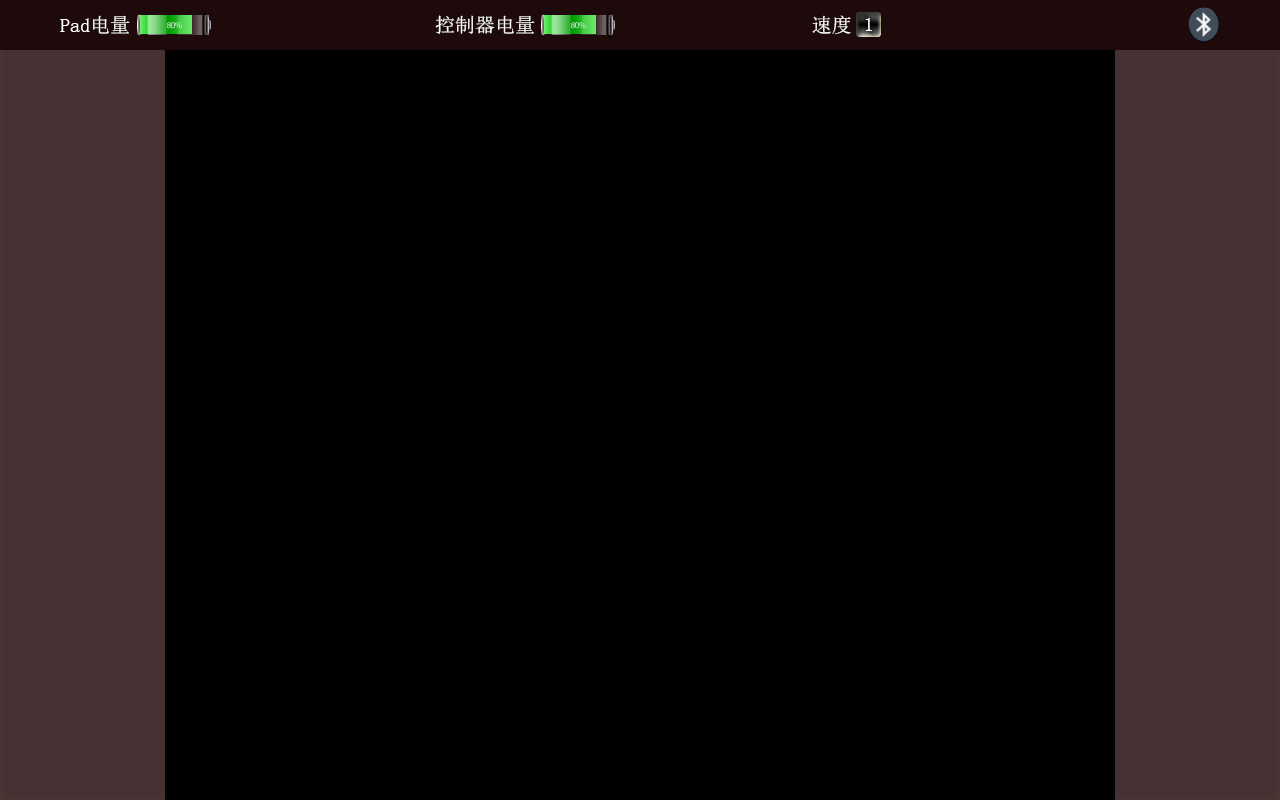
<style>
.page{position:relative;width:1280px;height:800px;background:#000000}
.page>*{position:absolute;margin:0}
.t1{font:20px "SimSun";color:#ffffff}
.t2{font:9.1px "MyriadPro-Regular";letter-spacing:-0.05em}
</style>
<div class="page">
<p class="t1" style="left:60px;top:15px;width:70px;height:19px">Pad电量</p>
<p class="t1" style="left:435px;top:15px;width:100px;height:19px">控制器电量</p>
<p class="t1" style="left:812px;top:15px;width:39px;height:20px">速度</p>
<p class="t2" style="left:167px;top:22px;width:15px;height:7px">80%</p>
<p class="t2" style="left:571px;top:22px;width:15px;height:7px">80%</p>
<p class="t1" style="left:865px;top:18px;width:7px;height:13px">1</p>
</div>
